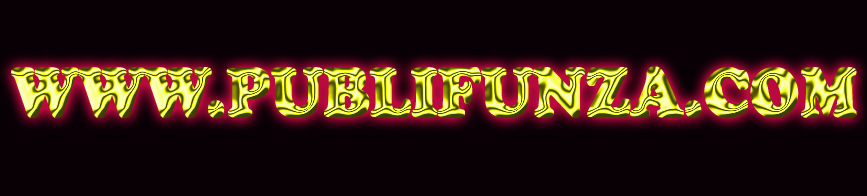
<style>
.page{position:relative;width:867px;height:196px;background:#080005}
.page>*{position:absolute;margin:0}
.t1{font:69px "CooperBlackStd";letter-spacing:-0.01em;text-transform:uppercase;font-weight:bold;scale:0.87 1}
</style>
<div class="page">
<p class="t1" style="left:11px;top:66px;width:846px;height:52px">www.publifunza.com</p>
</div>
